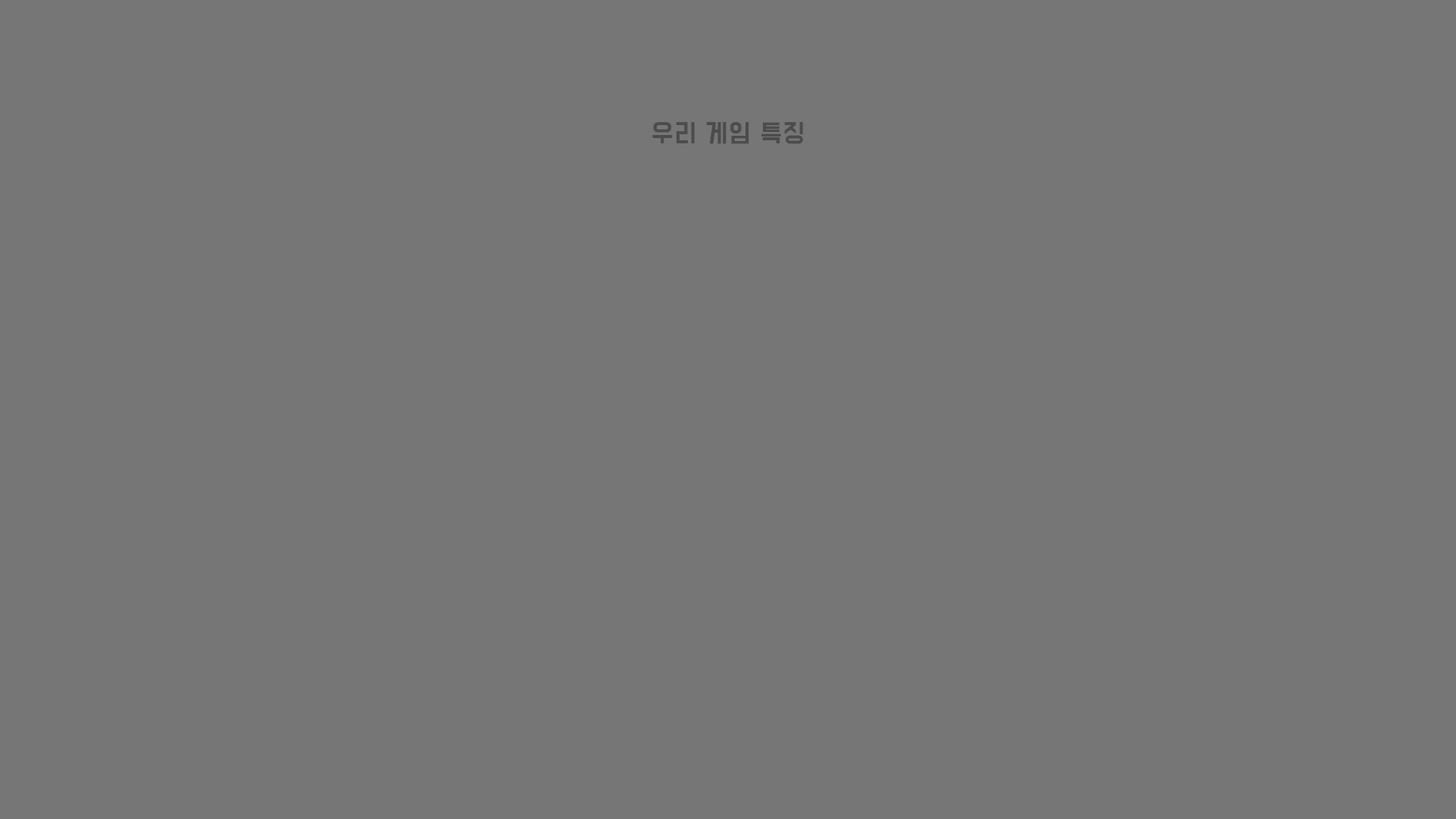
<style>
.page{position:relative;width:1456px;height:819px;background:#767676}
.page>*{position:absolute;margin:0}
.t1{font:22.7px "BMDoHyeon";letter-spacing:0.05em;color:#4c4c4c}
</style>
<div class="page">
<p class="t1" style="left:652px;top:122px;width:151px;height:22px">우리 게임 특징</p>
</div>
